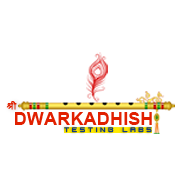
<style>
.page{position:relative;width:180px;height:180px;background:#ffffff}
.page>*{position:absolute;margin:0}
.t1{font:11.4px "KrutiDev010";color:#e12000;font-weight:bold}
.t2{font:17.6px "Arial-BoldMT";color:#e12000;scale:1.04 1}
.t3{font:7.7px "IgnisetGlaciesSharp";letter-spacing:0.35em;color:#02308d}
</style>
<div class="page">
<p class="t1" style="left:6px;top:101px;width:11px;height:9px">Jh</p>
<p class="t2" style="left:15px;top:112px;width:137px;height:13px">DWARKADHISH</p>
<p class="t3" style="left:64px;top:127px;width:88px;height:6px">TESTING LABS</p>
</div>
